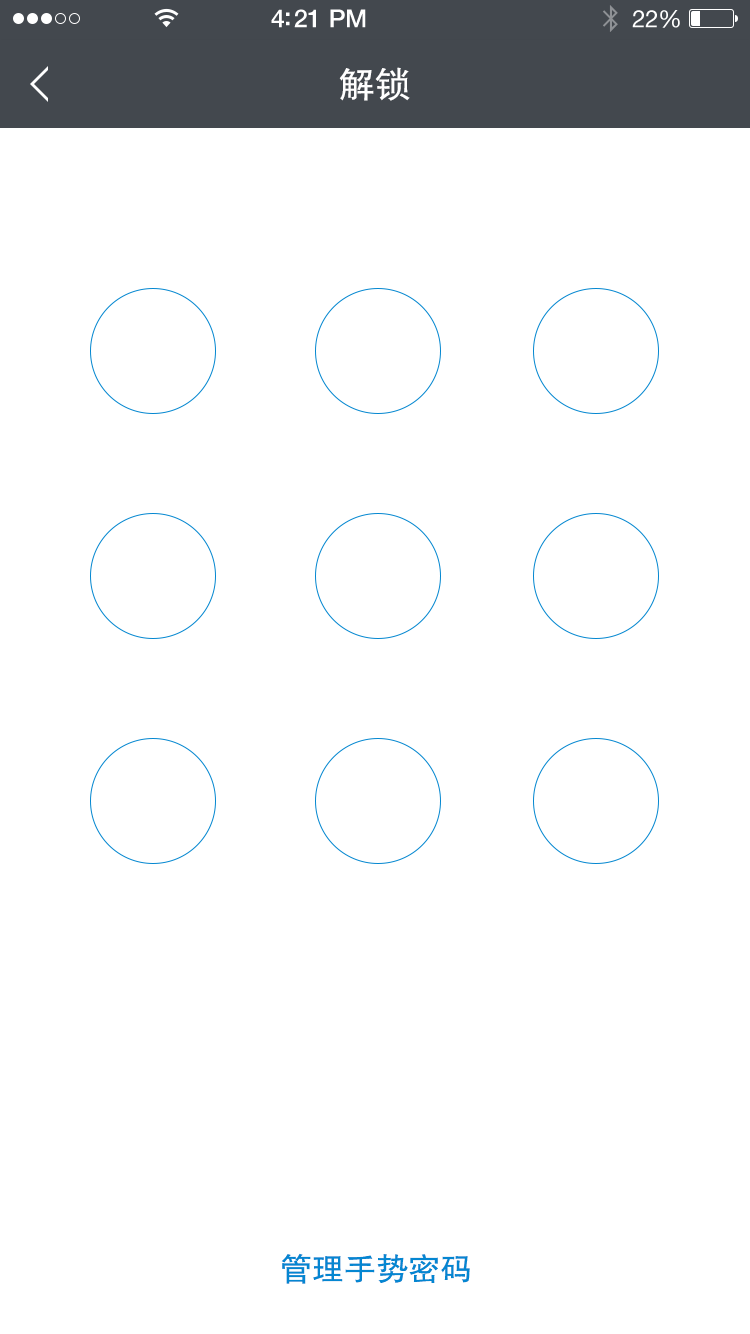
<style>
.page{position:relative;width:750px;height:1334px;background:#ffffff}
.page>*{position:absolute;margin:0}
.t1{font:36px "FZHTJW--GB1-0";color:#ffffff}
.t2{font:32px "FZHTJW--GB1-0";color:#0486d1}
</style>
<div class="page">
<p class="t1" style="left:339px;top:67px;width:71px;height:34px">解锁</p>
<p class="t2" style="left:281px;top:1253px;width:189px;height:31px">管理手势密码</p>
</div>
